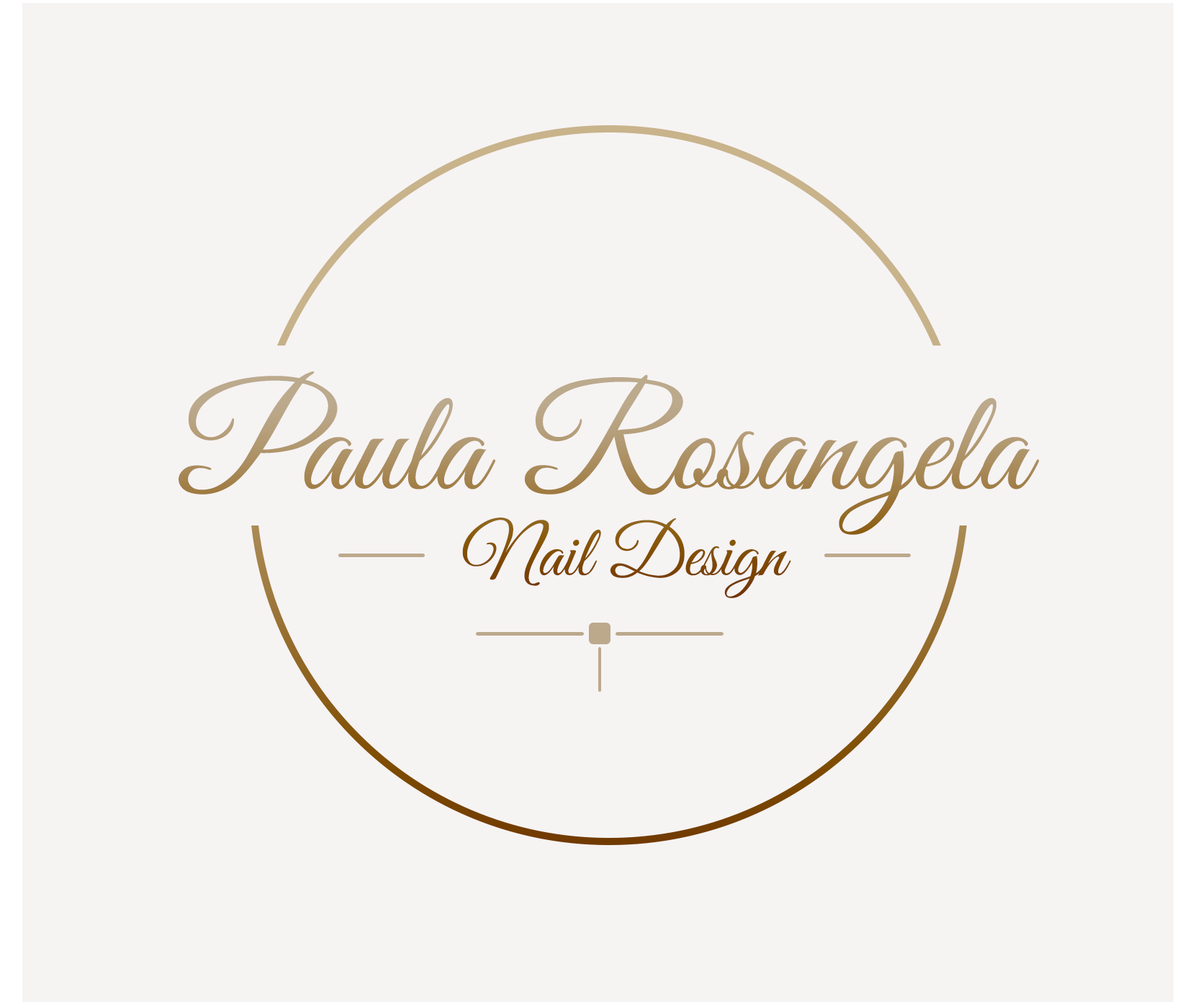
<style>
.page{position:relative;width:1190px;height:1002px;background:#f6f3f3}
.page>*{position:absolute;margin:0}
.t1{font:144px "GreatVibes-Regular"}
.t2{font:72px "GreatVibes-Regular"}
</style>
<div class="page">
<p class="t1" style="left:179px;top:371px;width:861px;height:227px;text-align:center">Paula Rosangela <br><span class="t2">Nail Design</span></p>
</div>
